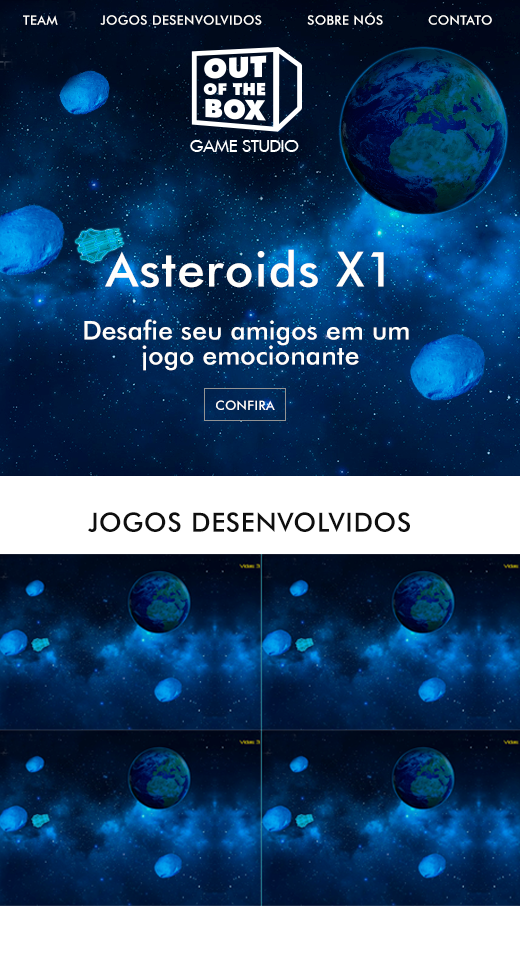
<style>
.page{position:relative;width:520px;height:960px}
.page>*{position:absolute;margin:0}
.t1{font:13px "FuturaBT-Medium";letter-spacing:0.025em;color:#fffefc;text-transform:uppercase}
.t2{font:48.5px "FuturaBT-Medium";letter-spacing:0.025em;color:#fffefc}
.t3{font:26px/25px "FuturaBT-Medium";letter-spacing:0.005em;color:#fffefc}
.t4{font:26.5px "FuturaBT-Medium";letter-spacing:0.025em;color:#0f0f0f;text-transform:uppercase}
</style>
<div class="page">
<p class="t1" style="left:23px;top:15px;width:35px;height:10px">Team</p>
<p class="t1" style="left:100px;top:15px;width:162px;height:10px">Jogos desenvolvidos</p>
<p class="t1" style="left:307px;top:12px;width:76px;height:13px">Sobre Nós</p>
<p class="t1" style="left:428px;top:15px;width:64px;height:10px">Contato</p>
<p class="t2" style="left:105px;top:249px;width:279px;height:39px">Asteroids X1</p>
<p class="t3" style="left:84px;top:319px;width:325px;height:52px;text-align:center">Desafie seu amigos em um <br>jogo emocionante</p>
<p class="t1" style="left:216px;top:400px;width:59px;height:10px">CONFIRA</p>
<p class="t4" style="left:88px;top:512px;width:322px;height:20px">Jogos desenvolvidos</p>
</div>
